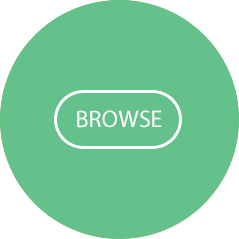
<style>
.page{position:relative;width:239px;height:239px;background:#65c18c}
.page>*{position:absolute;margin:0}
.t1{font:24px "MyriadPro-Regular";letter-spacing:0.005em;color:#ffffff}
</style>
<div class="page">
<p class="t1" style="left:77px;top:110px;width:85px;height:18px">BROWSE</p>
</div>
